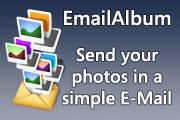
<style>
.page{position:relative;width:180px;height:120px}
.page>*{position:absolute;margin:0}
.t1{font:18px "SegoeMediaCenter-Semibold";color:#ffffff}
.t2{font:20px "SegoeMediaCenter-Semibold";color:#ffffff}
</style>
<div class="page">
<p class="t1" style="left:62px;top:10px;width:109px;height:99px;text-align:center"><span class="t2">EmailAlbum<br><br></span>Send your<br>photos in a<br>simple E-Mail</p>
</div>
